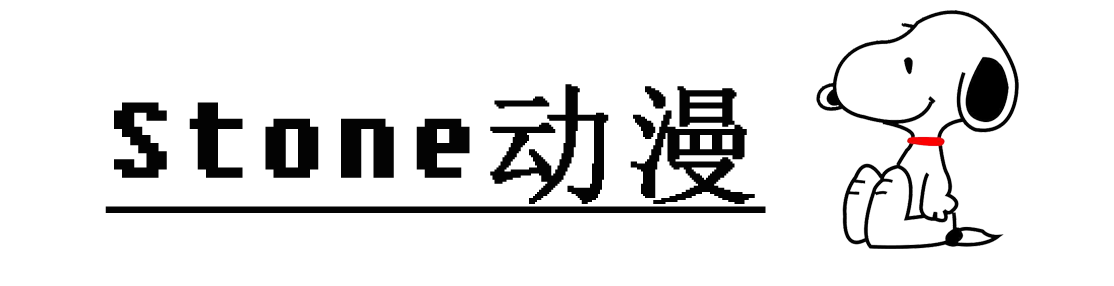
<style>
.page{position:relative;width:1114px;height:286px;background:#ffffff}
.page>*{position:absolute;margin:0}
.t1{font:130px "Fixedsys";letter-spacing:0.08em;color:#030303;font-weight:bold;text-decoration:underline}
</style>
<div class="page">
<p class="t1" style="left:105px;top:84px;width:661px;height:129px">Stone动漫</p>
</div>
